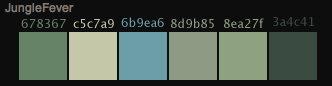
<style>
.page{position:relative;width:332px;height:86px;background:#0d0d0d}
.page>*{position:absolute;margin:0}
.t1{font:12px "LucidaGrande";color:#6b9ea6}
.t2{font:12px "LucidaGrande";color:#3a4c41}
.t3{font:12px "LucidaGrande";color:#678367}
.t4{font:12px "LucidaGrande";color:#c5c7a9}
.t5{font:12px "LucidaGrande";color:#8d9b85}
.t6{font:12px "LucidaGrande";color:#8ea27f}
</style>
<div class="page">
<p class="t1" style="left:121px;top:17px;width:43px;height:10px">6b9ea6</p>
<p class="t2" style="left:273px;top:17px;width:41px;height:9px">3a4c41</p>
<p class="t3" style="left:21px;top:19px;width:45px;height:9px">678367</p>
<p class="t4" style="left:73px;top:19px;width:41px;height:9px">c5c7a9</p>
<p class="t5" style="left:171px;top:18px;width:43px;height:10px">8d9b85</p>
<p class="t6" style="left:224px;top:18px;width:40px;height:10px">8ea27f</p>
</div>
